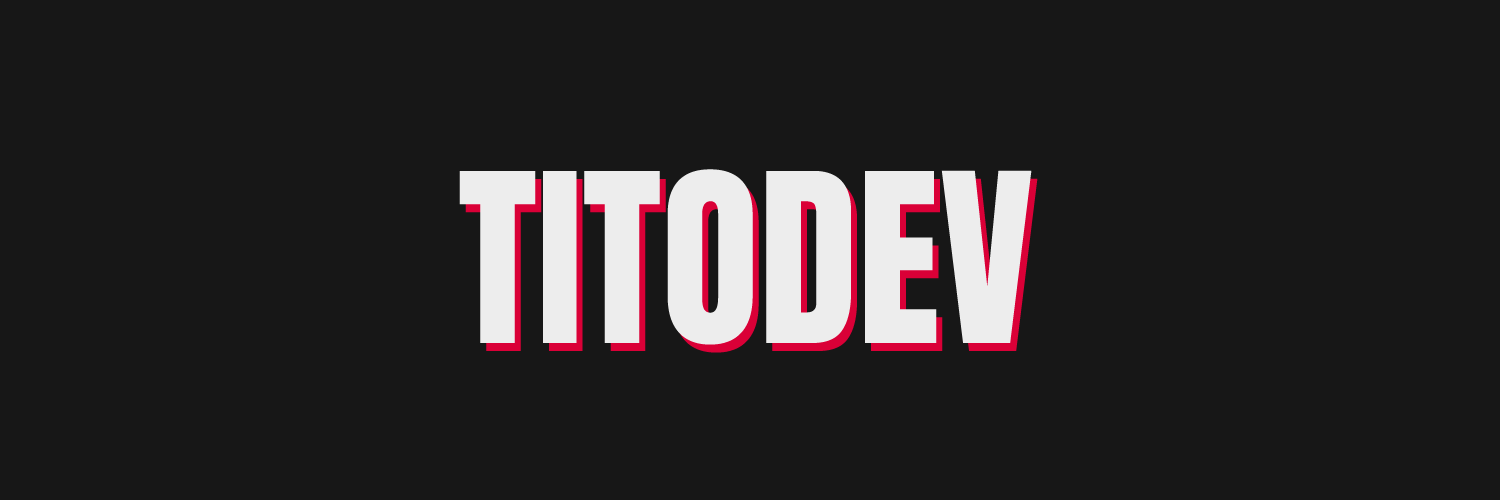
<style>
.page{position:relative;width:1500px;height:500px;background:#171717}
.page>*{position:absolute;margin:0}
.t1{font:200px "Anton-Regular";color:#ededed}
</style>
<div class="page">
<p class="t1" style="left:459px;top:169px;width:573px;height:176px">TITODEV</p>
<p class="t1" style="left:465px;top:177px;width:573px;height:176px">TITODEV</p>
</div>
